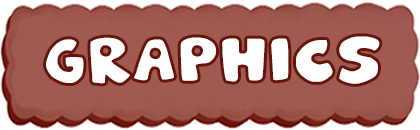
<style>
.page{position:relative;width:420px;height:130px;background:#a05a51}
.page>*{position:absolute;margin:0}
.t1{font:28px "PatchworkStitchlingsColor";letter-spacing:-0.025em;color:#ffffff}
</style>
<div class="page">
<p class="t1" style="left:46px;top:36px;width:334px;height:48px;text-align:center">graphics</p>
</div>
